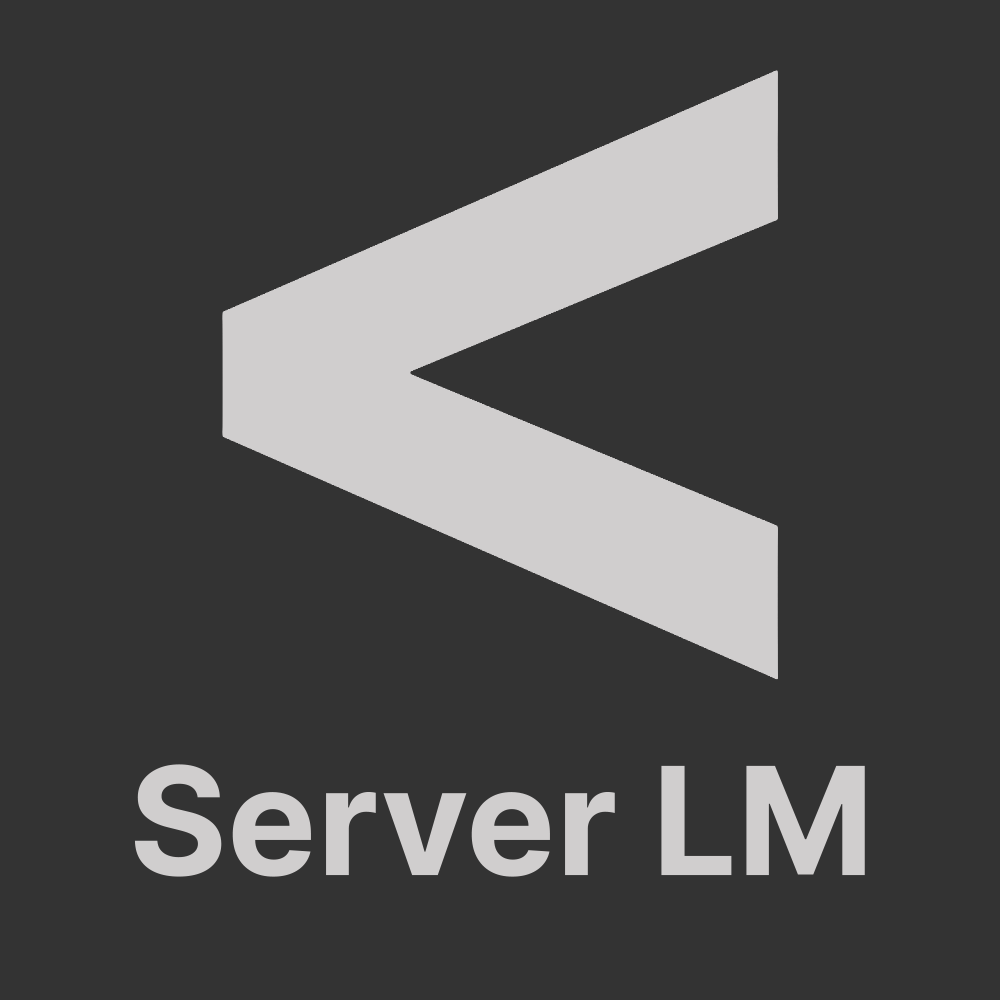
<style>
.page{position:relative;width:1000px;height:1000px;background:#333333}
.page>*{position:absolute;margin:0}
.t1{font:150px "Inter-Bold";color:#d0cece}
</style>
<div class="page">
<p class="t1" style="left:134px;top:764px;width:731px;height:113px">Server LM</p>
</div>
